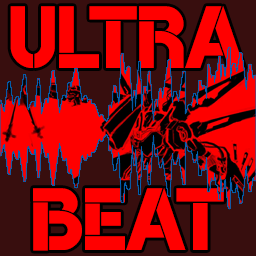
<style>
.page{position:relative;width:256px;height:256px;background:#380e0e}
.page>*{position:absolute;margin:0}
.t1{font:120px "BroshK";color:#ff0000}
</style>
<div class="page">
<p class="t1" style="left:10px;top:6px;width:235px;height:62px">ULTRA</p>
<p class="t1" style="left:33px;top:188px;width:191px;height:63px">beat</p>
</div>
